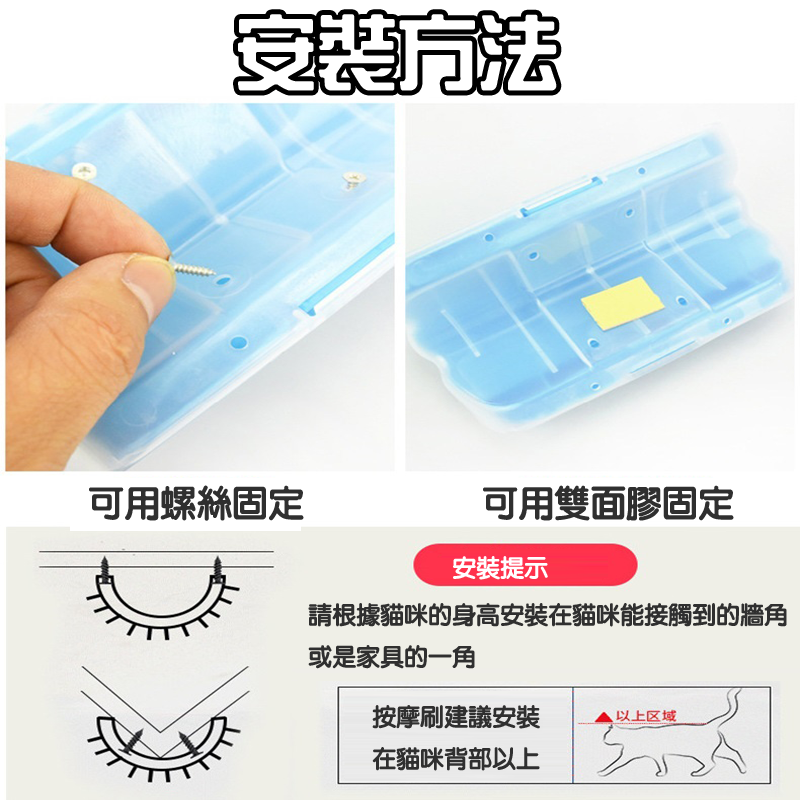
<style>
.page{position:relative;width:800px;height:800px}
.page>*{position:absolute;margin:0}
.t1{font:81px "HanWangZonYi";color:#ffffff}
.t2{font:36px "HanWangYenHeavy";color:#2f2f2f}
.t3{font:24px "HanWangYenHeavy";color:#ffffff}
.t4{font:24px "HanWangYenHeavy";color:#2f2f2f}
</style>
<div class="page">
<p class="t1" style="left:238px;top:14px;width:319px;height:77px">安裝方法</p>
<p class="t2" style="left:89px;top:485px;width:215px;height:36px">可用螺絲固定</p>
<p class="t2" style="left:483px;top:485px;width:251px;height:36px">可用雙面膠固定</p>
<p class="t3" style="left:453px;top:556px;width:95px;height:24px">安裝提示</p>
<p class="t4" style="left:308px;top:603px;width:479px;height:66px">請根據貓咪的身高安裝在貓咪能接觸到的牆角<br>或是家具的一角</p>
<p class="t4" style="left:372px;top:705px;width:168px;height:66px">按摩刷建議安裝<br>在貓咪背部以上</p>
</div>
